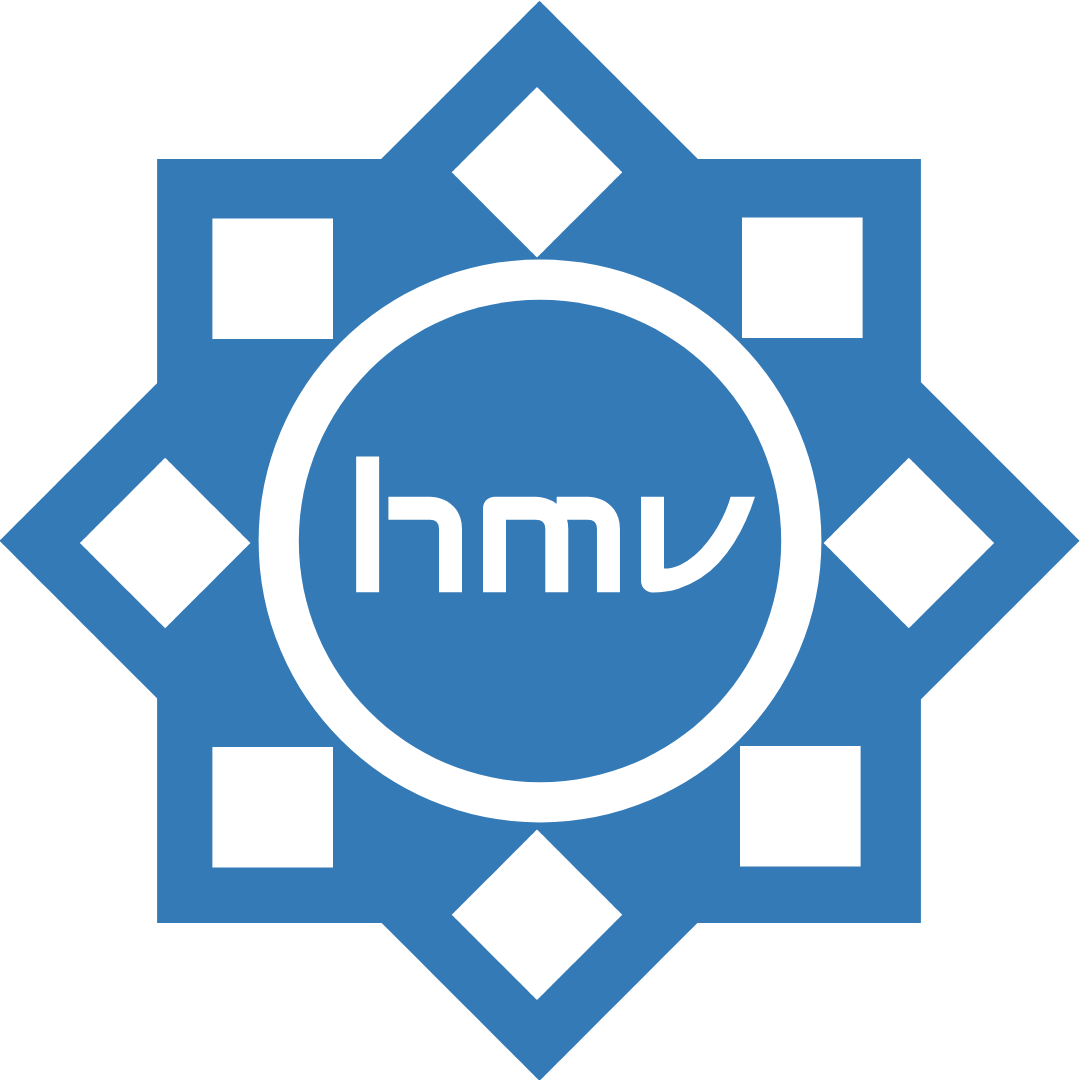
<style>
.page{position:relative;width:1080px;height:1080px;background:#ffffff}
.page>*{position:absolute;margin:0}
.t1{font:180.9px "Audiowide-Regular";color:#ffffff}
</style>
<div class="page">
<p class="t1" style="left:356px;top:456px;width:399px;height:137px">hmv</p>
</div>
